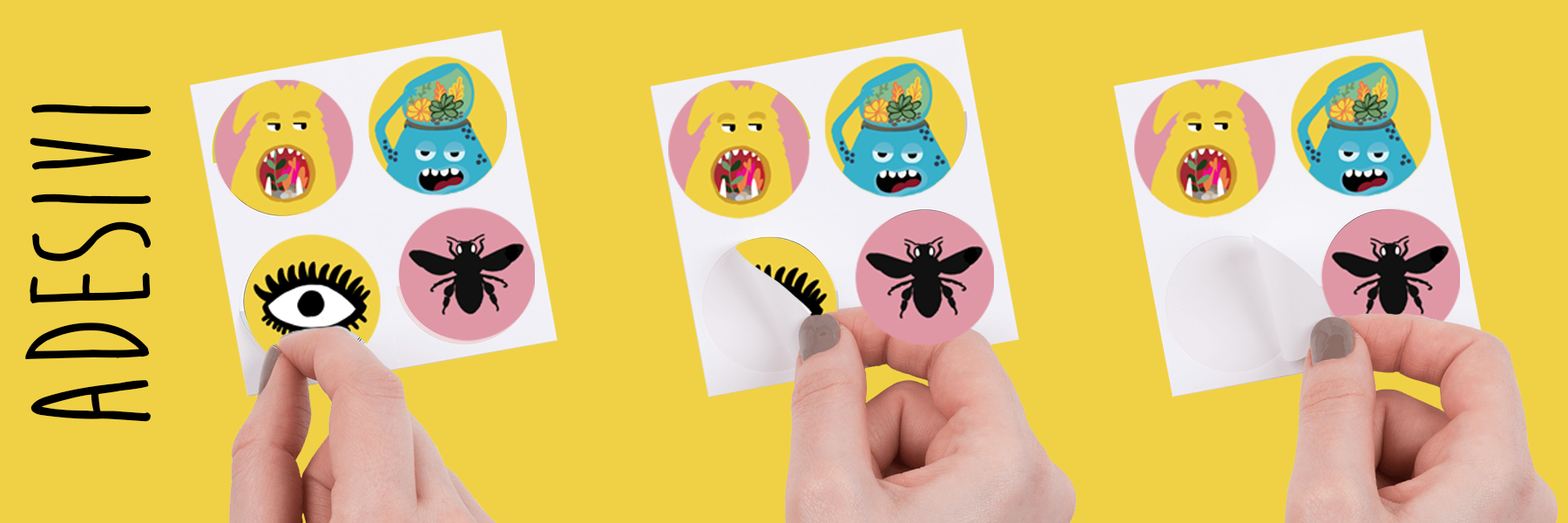
<style>
.page{position:relative;width:1568px;height:523px;background:#f0d145}
.page>*{position:absolute;margin:0}
.t1{font:174.2px "MoonFlowerBold";color:#000000}
</style>
<div class="page">
<p class="t1" style="left:25px;top:104px;width:126px;height:318px;rotate:-90deg">adesivi</p>
</div>
